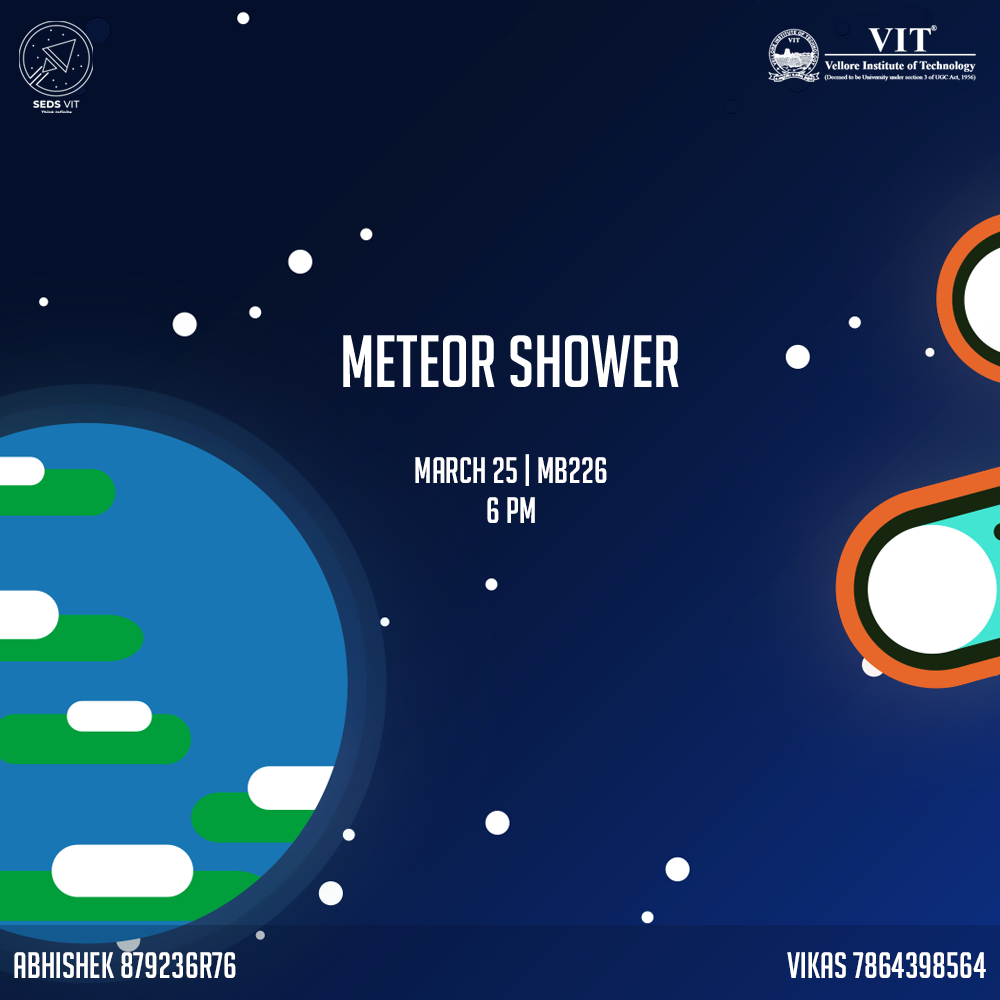
<style>
.page{position:relative;width:1000px;height:1000px}
.page>*{position:absolute;margin:0}
.t1{font:36px "BigNoodleTitling";color:#ffffff}
</style>
<div class="page">
<p class="t1" style="left:415px;top:454px;width:192px;height:32px">MARCH 25 | MB226</p>
<p class="t1" style="left:487px;top:497px;width:48px;height:26px">6 PM</p>
<p class="t1" style="left:14px;top:952px;width:222px;height:26px">ABHISHEK 879236R76</p>
<p class="t1" style="left:787px;top:952px;width:199px;height:26px">VIKAS 7864398564</p>
</div>
